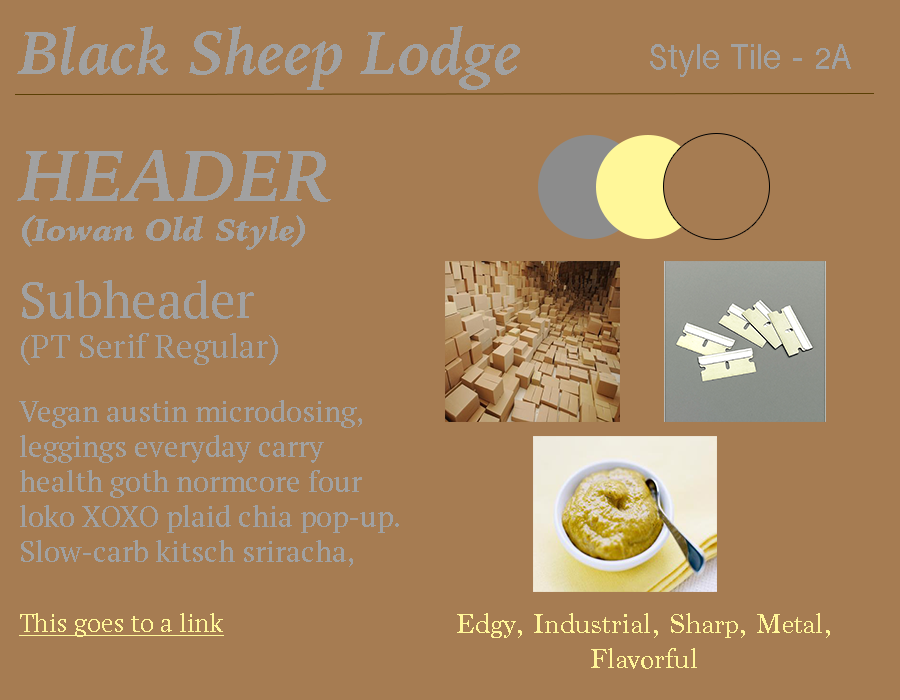
<style>
.page{position:relative;width:900px;height:700px;background:#a67c52}
.page>*{position:absolute;margin:0}
.t1{font:62.5px "IowanOldStyle-BoldItalic";color:#a1a1a1}
.t2{font:37.5px "InaiMathi";color:#a1a1a1}
.t3{font:33.3px "IowanOldStyle-BlackItalic";color:#a1a1a1}
.t4{font:75px "IowanOldStyle-BoldItalic";color:#a1a1a1}
.t5{font:33.3px "PTSerif-Regular";color:#a1a1a1}
.t6{font:50px "PTSerif-Regular";color:#a1a1a1}
.t7{font:29.2px "PTSerif-Regular";color:#a1a1a1}
.t8{font:25px "PTSerif-Regular";color:#fff799;text-decoration:underline}
.t9{font:29.2px "Marion-Regular";color:#fff799}
</style>
<div class="page">
<p class="t1" style="left:17px;top:26px;width:503px;height:64px">Black Sheep Lodge</p>
<p class="t2" style="left:650px;top:44px;width:201px;height:33px">Style Tile - 2A</p>
<p class="t3" style="left:17px;top:150px;width:314px;height:100px"><span class="t4">HEADER<br></span>(Iowan Old Style)</p>
<p class="t5" style="left:21px;top:280px;width:257px;height:85px"><span class="t6">Subheader<br></span>(PT Serif Regular)</p>
<p class="t7" style="left:19px;top:400px;width:380px;height:167px">Vegan austin microdosing, leggings everyday carry health goth normcore four loko XOXO plaid chia pop-up. Slow-carb kitsch sriracha, paleo VHS vinyl everyday carry umami squid pour-over.</p>
<p class="t8" style="left:19px;top:613px;width:205px;height:24px">This goes to a link</p>
<p class="t9" style="left:457px;top:613px;width:373px;height:56px;text-align:center">Edgy, Industrial, Sharp, Metal,<br>Flavorful</p>
</div>
